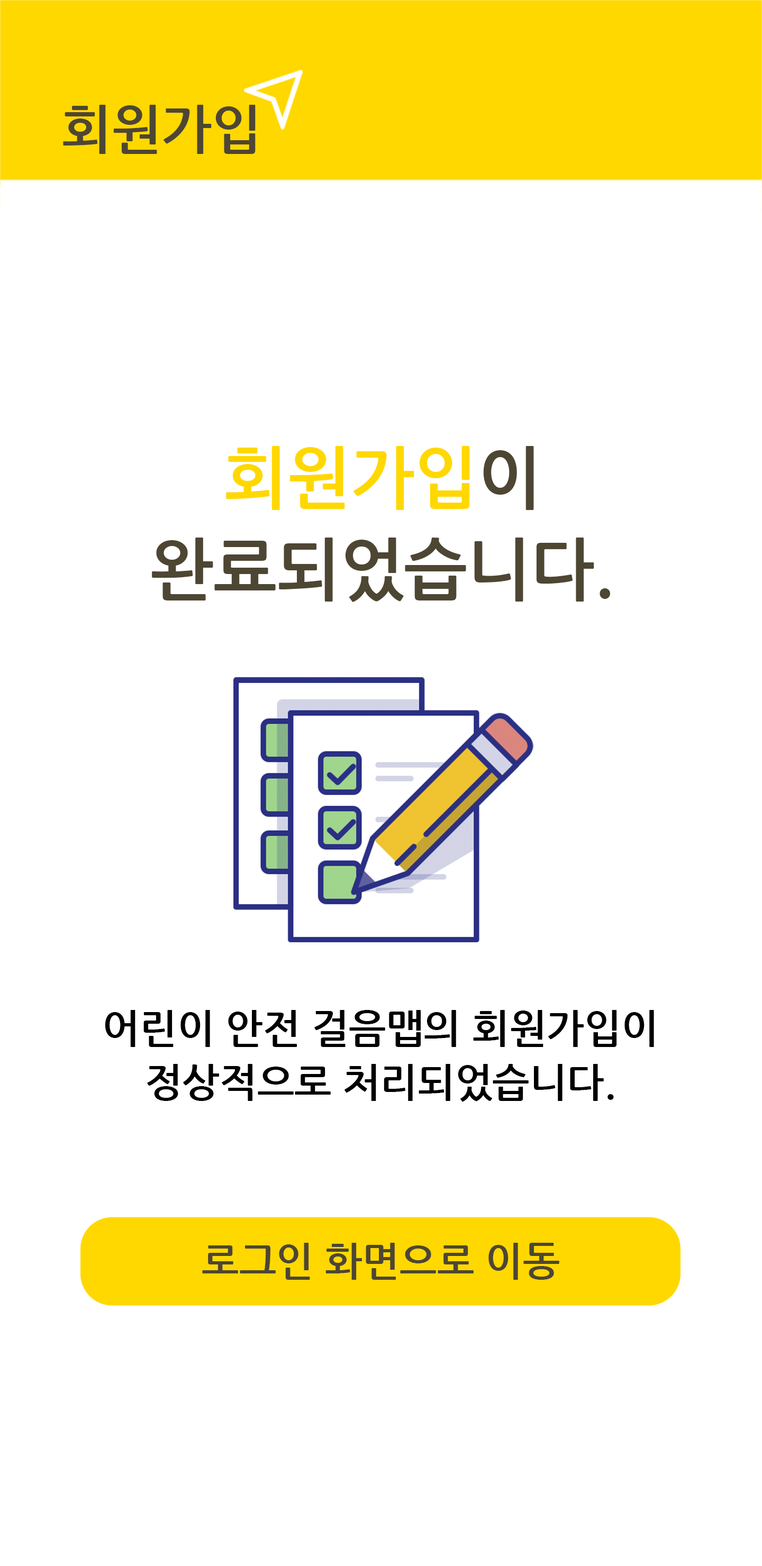
<style>
.page{position:relative;width:762px;height:1566px;background:#ffffff}
.page>*{position:absolute;margin:0}
.t1{font:53.4px "NanumGothicBold";color:#4d4633}
.t2{font:67.5px/91.7px "NanumGothicBold";color:#4d4633}
.t3{font:67.5px/91.7px "NanumGothicBold";color:#ffd800}
.t4{font:39.7px/53.9px "NanumGothicBold";color:#000000}
.t5{font:39.7px "NanumGothicBold";color:#4d4633}
</style>
<div class="page">
<p class="t1" style="left:63px;top:105px;width:192px;height:49px">회원가입</p>
<p class="t2" style="left:152px;top:446px;width:458px;height:156px;text-align:center"><span class="t3">회원가입</span>이<br>완료되었습니다.</p>
<p class="t4" style="left:105px;top:1010px;width:549px;height:92px;text-align:center">어린이 안전 걸음맵의 회원가입이<br>정상적으로 처리되었습니다.</p>
<p class="t5" style="left:202px;top:1242px;width:357px;height:37px">로그인 화면으로 이동</p>
</div>
